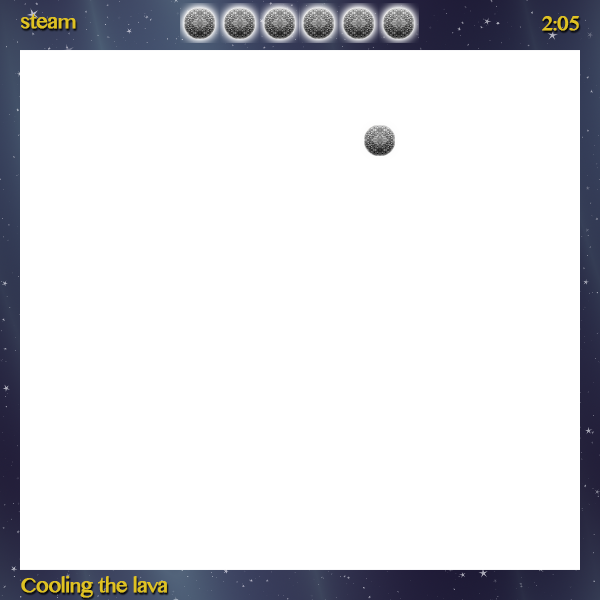
<style>
.page{position:relative;width:600px;height:600px;background:#ffffff}
.page>*{position:absolute;margin:0}
.t1{font:20px "LaoMN";letter-spacing:-0.04em;color:#dfc222;font-weight:bold}
</style>
<div class="page">
<p class="t1" style="left:21px;top:14px;width:55px;height:15px">steam</p>
<p class="t1" style="left:542px;top:16px;width:37px;height:15px">2:05</p>
<p class="t1" style="left:21px;top:576px;width:146px;height:22px">Cooling the lava</p>
</div>
